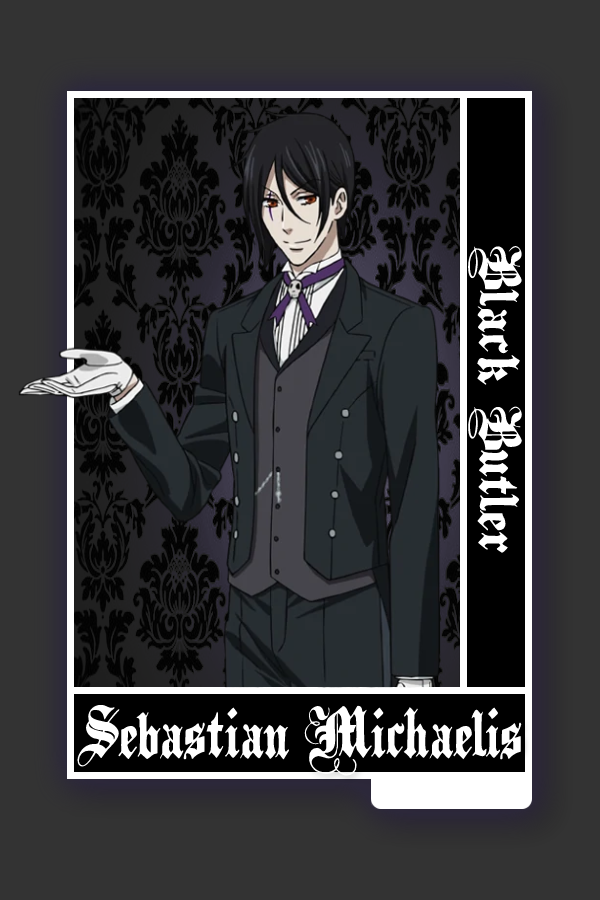
<style>
.page{position:relative;width:600px;height:900px;background:#333333}
.page>*{position:absolute;margin:0}
.t1{font:48.8px "PlainBlackWide-Normal";color:#ffffff}
.t2{font:58px "PlainBlack-Normal";color:#ffffff}
</style>
<div class="page">
<p class="t1" style="left:468px;top:246px;width:54px;height:307px;rotate:90deg">Black Butler</p>
<p class="t2" style="left:77px;top:704px;width:445px;height:72px">Sebastian Michaelis</p>
</div>
